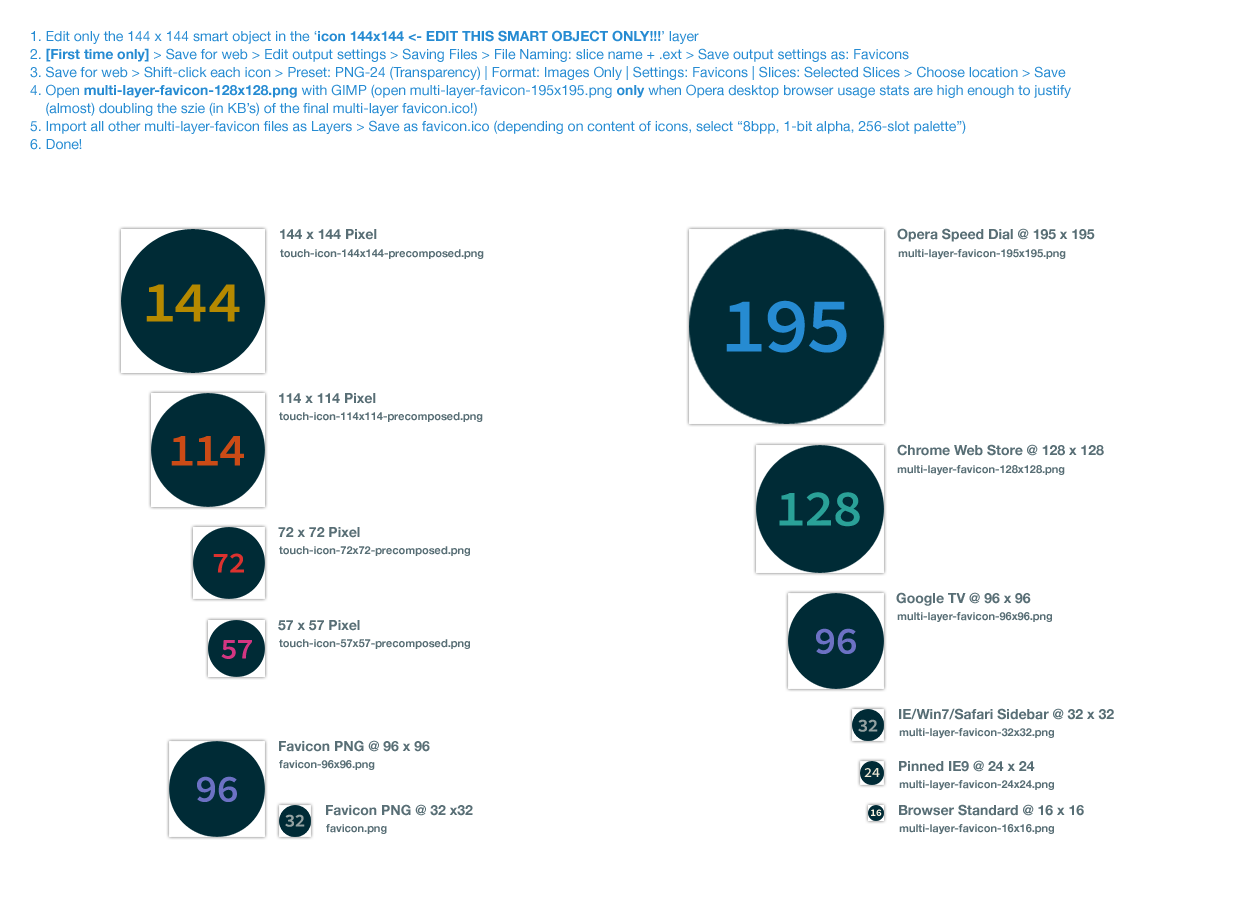
<style>
.page{position:relative;width:1240px;height:920px;background:#ffffff}
.page>*{position:absolute;margin:0}
.t1{font:14px/18px "HelveticaNeue";color:#268bd2}
.t2{font:14px/18px "HelveticaNeue-Bold";color:#268bd2}
.t3{font:14px "HelveticaNeue-Bold";color:#586e75}
.t4{font:11px "HelveticaNeue-Bold";color:#586e75}
.t5{font:58px "SourceCodePro-Semibold";color:#b58900}
.t6{font:78px "SourceCodePro-Semibold";color:#268bd2}
.t7{font:46px "SourceCodePro-Semibold";color:#cb4b16}
.t8{font:51px "SourceCodePro-Semibold";color:#2aa198}
.t9{font:29px "SourceCodePro-Semibold";color:#dc322f}
.t10{font:38px "SourceCodePro-Semibold";color:#6c71c4}
.t11{font:29px "SourceCodePro-Semibold";color:#d33682}
.t12{font:18px "SourceCodePro-Semibold";color:#93a1a1}
.t13{font:14px "SourceCodePro-Semibold";color:#eee8d5}
.t14{font:10px "SourceCodePro-Bold";color:#fdf6e3}
</style>
<div class="page">
<p class="t1" style="left:30px;top:30px;width:1041px;height:120px">1. Edit only the 144 x 144 smart object in the ‘<span class="t2">icon 144x144 &lt;- EDIT THIS SMART OBJECT ONLY!!!</span>’ layer<br>2. <span class="t2">[First time only]</span> &gt; Save for web &gt; Edit output settings &gt; Saving Files &gt; File Naming: slice name + .ext &gt; Save output settings as: Favicons<br>3. Save for web &gt; Shift-click each icon &gt; Preset: PNG-24 (Transparency) | Format: Images Only | Settings: Favicons | Slices: Selected Slices &gt; Choose location &gt; Save<br>4. Open <span class="t2">multi-layer-favicon-128x128.png</span> with GIMP (open multi-layer-favicon-195x195.png <span class="t2">only</span> when Opera desktop browser usage stats are high enough to justify<br>    (almost) doubling the szie (in KB’s) of the final multi-layer favicon.ico!)<br>5. Import all other multi-layer-favicon files as Layers &gt; Save as favicon.ico (depending on content of icons, select “8bpp, 1-bit alpha, 256-slot palette”)<br>6. Done!</p>
<p class="t3" style="left:280px;top:229px;width:97px;height:11px">144 x 144 Pixel</p>
<p class="t3" style="left:897px;top:228px;width:198px;height:14px">Opera Speed Dial @ 195 x 195</p>
<p class="t4" style="left:280px;top:249px;width:204px;height:10px">touch-icon-144x144-precomposed.png</p>
<p class="t4" style="left:898px;top:249px;width:168px;height:10px">multi-layer-favicon-195x195.png</p>
<p class="t5" style="left:146px;top:284px;width:94px;height:38px">144</p>
<p class="t6" style="left:726px;top:300px;width:121px;height:53px">195</p>
<p class="t3" style="left:279px;top:393px;width:97px;height:11px">114 x 114 Pixel</p>
<p class="t4" style="left:279px;top:412px;width:204px;height:10px">touch-icon-114x114-precomposed.png</p>
<p class="t7" style="left:171px;top:436px;width:73px;height:30px">114</p>
<p class="t3" style="left:897px;top:444px;width:207px;height:12px">Chrome Web Store @ 128 x 128</p>
<p class="t4" style="left:897px;top:465px;width:168px;height:10px">multi-layer-favicon-128x128.png</p>
<p class="t8" style="left:779px;top:492px;width:81px;height:35px">128</p>
<p class="t3" style="left:278px;top:527px;width:82px;height:11px">72 x 72 Pixel</p>
<p class="t9" style="left:213px;top:553px;width:31px;height:20px">72</p>
<p class="t4" style="left:279px;top:546px;width:191px;height:10px">touch-icon-72x72-precomposed.png</p>
<p class="t3" style="left:896px;top:592px;width:135px;height:14px">Google TV @ 96 x 96</p>
<p class="t4" style="left:897px;top:612px;width:155px;height:10px">multi-layer-favicon-96x96.png</p>
<p class="t3" style="left:278px;top:620px;width:82px;height:11px">57 x 57 Pixel</p>
<p class="t10" style="left:816px;top:628px;width:40px;height:26px">96</p>
<p class="t11" style="left:221px;top:640px;width:31px;height:19px">57</p>
<p class="t4" style="left:279px;top:639px;width:191px;height:10px">touch-icon-57x57-precomposed.png</p>
<p class="t3" style="left:899px;top:708px;width:215px;height:12px">IE/Win7/Safari Sidebar @ 32 x 32</p>
<p class="t12" style="left:858px;top:719px;width:20px;height:13px">32</p>
<p class="t4" style="left:899px;top:728px;width:155px;height:10px">multi-layer-favicon-32x32.png</p>
<p class="t3" style="left:279px;top:740px;width:151px;height:12px">Favicon PNG @ 96 x 96</p>
<p class="t4" style="left:279px;top:760px;width:96px;height:10px">favicon-96x96.png</p>
<p class="t3" style="left:899px;top:760px;width:136px;height:12px">Pinned IE9 @ 24 x 24</p>
<p class="t13" style="left:864px;top:768px;width:16px;height:9px">24</p>
<p class="t10" style="left:197px;top:776px;width:40px;height:26px">96</p>
<p class="t4" style="left:899px;top:780px;width:155px;height:10px">multi-layer-favicon-24x24.png</p>
<p class="t3" style="left:326px;top:804px;width:147px;height:12px">Favicon PNG @ 32 x32</p>
<p class="t14" style="left:871px;top:809px;width:11px;height:7px">16</p>
<p class="t3" style="left:899px;top:804px;width:185px;height:12px">Browser Standard @ 16 x 16</p>
<p class="t12" style="left:285px;top:814px;width:20px;height:13px">32</p>
<p class="t4" style="left:326px;top:824px;width:61px;height:10px">favicon.png</p>
<p class="t4" style="left:899px;top:824px;width:155px;height:10px">multi-layer-favicon-16x16.png</p>
</div>
